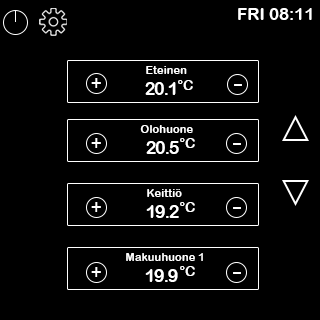
<style>
.page{position:relative;width:320px;height:320px;background:#000000}
.page>*{position:absolute;margin:0}
.t1{font:16.9px "ArialRoundedMTBold";color:#ffffff}
.t2{font:21.5px "Alef-Regular";color:#ffffff}
.t3{font:11.3px "ArialRoundedMTBold";color:#ffffff}
.t4{font:17.6px "ArialRoundedMTBold";letter-spacing:-0.06em;color:#ffffff}
.t5{font:13.7px "ArialRoundedMTBold";color:#ffffff}
.t6{font:21.3px "Alef-Regular";color:#ffffff}
</style>
<div class="page">
<p class="t1" style="left:238px;top:8px;width:74px;height:12px">FRI 08:11</p>
<p class="t2" style="left:91px;top:78px;width:10px;height:10px">+</p>
<p class="t3" style="left:146px;top:66px;width:41px;height:8px">Eteinen</p>
<p class="t4" style="left:145px;top:82px;width:31px;height:13px">20.1</p>
<p class="t5" style="left:178px;top:80px;width:15px;height:10px">°C</p>
<p class="t6" style="left:234px;top:84px;width:8px;height:2px">-</p>
<p class="t3" style="left:140px;top:125px;width:53px;height:8px">Olohuone</p>
<p class="t2" style="left:91px;top:138px;width:10px;height:10px">+</p>
<p class="t4" style="left:146px;top:141px;width:33px;height:13px">20.5</p>
<p class="t5" style="left:180px;top:138px;width:15px;height:10px">°C</p>
<p class="t6" style="left:233px;top:143px;width:8px;height:2px">-</p>
<p class="t3" style="left:147px;top:189px;width:35px;height:8px">Keittiö</p>
<p class="t2" style="left:91px;top:202px;width:10px;height:10px">+</p>
<p class="t4" style="left:146px;top:205px;width:33px;height:13px">19.2</p>
<p class="t5" style="left:180px;top:202px;width:15px;height:10px">°C</p>
<p class="t6" style="left:233px;top:207px;width:8px;height:2px">-</p>
<p class="t3" style="left:126px;top:253px;width:77px;height:8px">Makuuhuone 1</p>
<p class="t2" style="left:91px;top:267px;width:10px;height:10px">+</p>
<p class="t4" style="left:145px;top:269px;width:33px;height:13px">19.9</p>
<p class="t5" style="left:180px;top:266px;width:15px;height:10px">°C</p>
<p class="t6" style="left:233px;top:272px;width:8px;height:2px">-</p>
</div>
